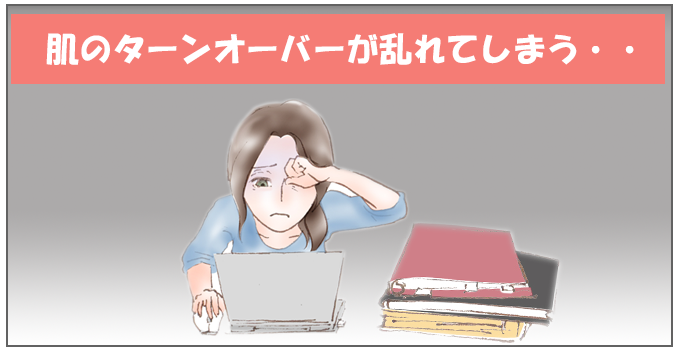
<style>
.page{position:relative;width:680px;height:350px;background:#acaaaa}
.page>*{position:absolute;margin:0}
.t1{font:33.3px "HGSoeiKakupoptai";color:#ffffff}
</style>
<div class="page">
<p class="t1" style="left:46px;top:33px;width:588px;height:32px">肌のターンオーバーが乱れてしまう・・</p>
</div>
